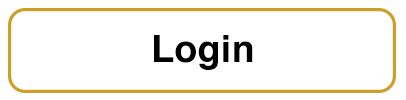
<style>
.page{position:relative;width:406px;height:100px;background:#ffffff}
.page>*{position:absolute;margin:0}
.t1{font:37.5px "Helvetica-Bold";letter-spacing:0.01em;color:#000000}
</style>
<div class="page">
<p class="t1" style="left:154px;top:35px;width:99px;height:35px">Login</p>
</div>
